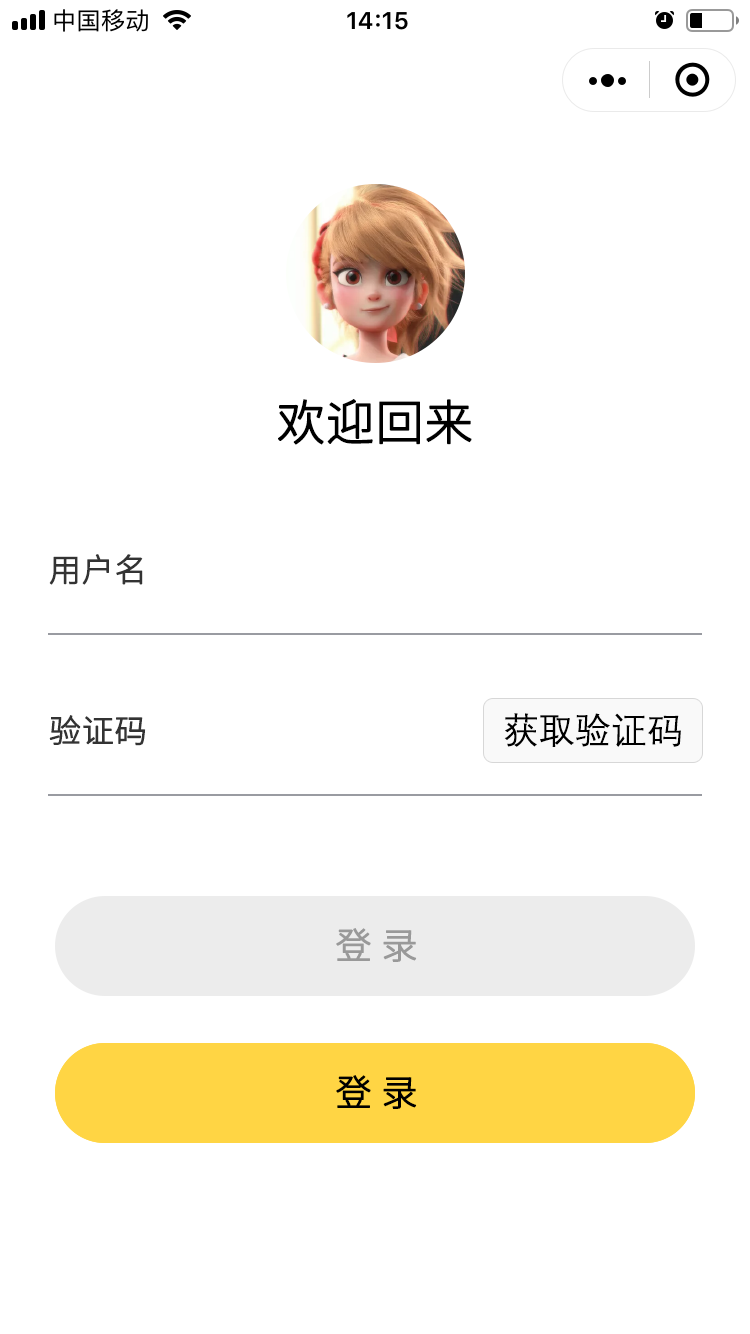
<style>
.page{position:relative;width:750px;height:1334px;background:#ffffff}
.page>*{position:absolute;margin:0}
.t1{font:48px "SourceHanSansSC-Light";color:#000000;font-weight:bold}
.t2{font:32px "SourceHanSansSC-Light";color:#333333;font-weight:bold}
.t3{font:36px "DengXian-Regular";color:#000000}
.t4{font:36px "SourceHanSansSC-Light";color:#999999;font-weight:bold}
.t5{font:36px "SourceHanSansSC-Light";color:#000000;font-weight:bold}
</style>
<div class="page">
<p class="t1" style="left:278px;top:399px;width:194px;height:46px">欢迎回来</p>
<p class="t2" style="left:49px;top:554px;width:94px;height:31px">用户名</p>
<p class="t3" style="left:504px;top:713px;width:177px;height:34px">获取验证码</p>
<p class="t2" style="left:49px;top:715px;width:97px;height:31px">验证码</p>
<p class="t4" style="left:336px;top:928px;width:81px;height:34px">登 录</p>
<p class="t5" style="left:336px;top:1075px;width:81px;height:34px">登 录</p>
<p class="t5" style="left:336px;top:1075px;width:81px;height:34px">登 录</p>
</div>
